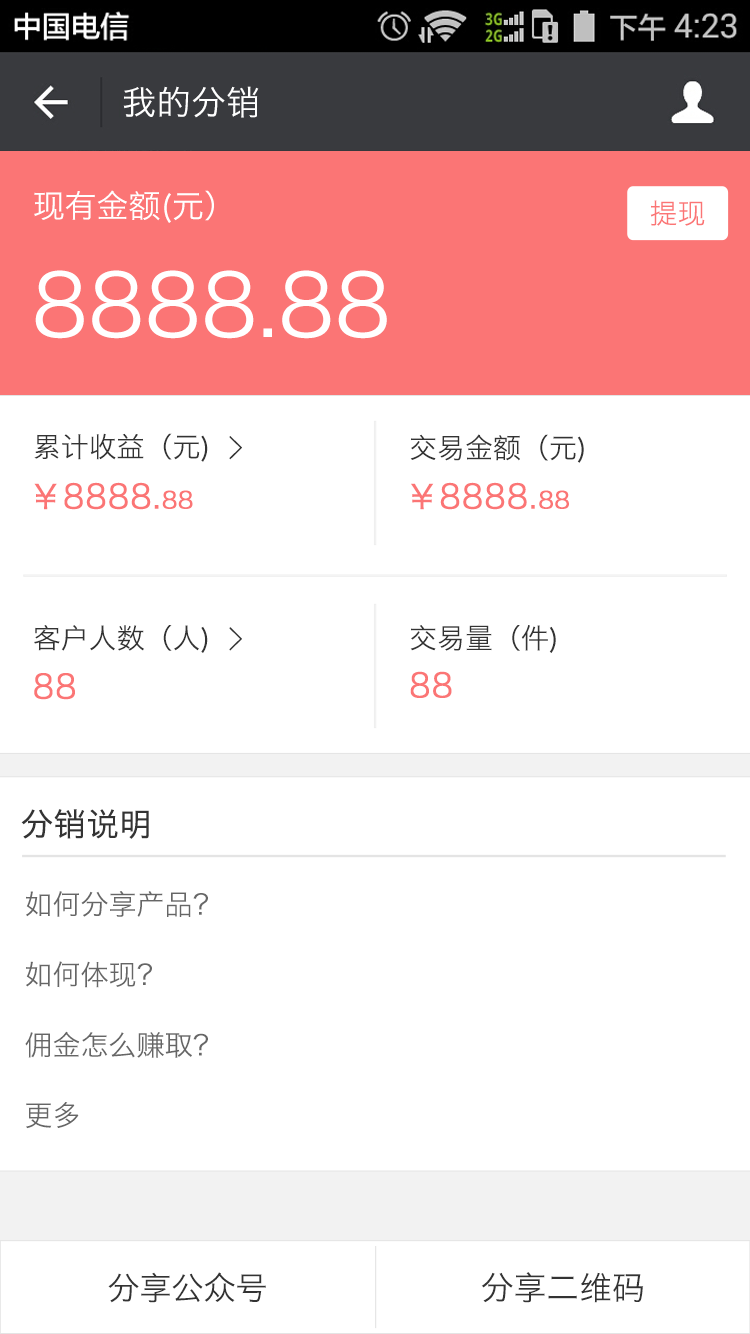
<style>
.page{position:relative;width:750px;height:1334px;background:#ffffff}
.page>*{position:absolute;margin:0}
.t1{font:34px "HiraginoSansGB-W3";letter-spacing:0.022em;color:#ffffff}
.t2{font:32px "HiraginoSansGB-W3";color:#ffffff}
.t3{font:28px "HiraginoSansGB-W3";color:#fb7575}
.t4{font:86px "HiraginoSansGB-W3";color:#ffffff}
.t5{font:28px "HiraginoSansGB-W3";color:#333333}
.t6{font:32.8px "SimSun";color:#333333;font-weight:bold}
.t7{font:32.8px "HiraginoSansGB-W3";color:#fb7575;font-weight:bold}
.t8{font:23.5px "HiraginoSansGB-W3";color:#fb7575;font-weight:bold}
.t9{font:32px "HiraginoSansGB-W3";color:#333333;font-weight:bold}
.t10{font:28px/70.4px "HiraginoSansGB-W3";color:#666666}
.t11{font:32px "HiraginoSansGB-W3";color:#333333}
.t12{font:32.8px "HiraginoSansGB-W3";color:#333333}
</style>
<div class="page">
<p class="t1" style="left:123px;top:86px;width:136px;height:32px">我的分销</p>
<p class="t2" style="left:34px;top:190px;width:180px;height:33px">现有金额(元）</p>
<p class="t3" style="left:650px;top:200px;width:55px;height:26px">提现</p>
<p class="t4" style="left:35px;top:270px;width:352px;height:69px">8888.88</p>
<p class="t5" style="left:34px;top:433px;width:174px;height:29px">累计收益（元)</p>
<p class="t6" style="left:229px;top:436px;width:13px;height:24px">&gt;</p>
<p class="t5" style="left:410px;top:434px;width:174px;height:29px">交易金额（元)</p>
<p class="t7" style="left:34px;top:482px;width:159px;height:28px">￥8888.<span class="t8">88</span></p>
<p class="t7" style="left:411px;top:482px;width:158px;height:28px">￥8888.<span class="t8">88</span></p>
<p class="t5" style="left:34px;top:625px;width:174px;height:28px">客户人数（人)</p>
<p class="t6" style="left:229px;top:627px;width:13px;height:24px">&gt;</p>
<p class="t5" style="left:410px;top:625px;width:146px;height:28px">交易量（件)</p>
<p class="t7" style="left:34px;top:673px;width:41px;height:27px">88</p>
<p class="t7" style="left:410px;top:671px;width:42px;height:27px">88</p>
<p class="t9" style="left:21px;top:809px;width:128px;height:30px">分销说明</p>
<p class="t10" style="left:25px;top:891px;width:183px;height:238px">如何分享产品？<br>如何体现？<br>佣金怎么赚取？<br>更多</p>
<p class="t11" style="left:108px;top:1272px;width:158px;height:31px">分享公众号</p>
<p class="t12" style="left:481px;top:1272px;width:163px;height:31px">分享二维码</p>
</div>
